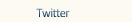
<style>
.page{position:relative;width:132px;height:22px;background:#fdfaf2}
.page>*{position:absolute;margin:0}
.t1{font:13px "Calibri";letter-spacing:-0.04em;scale:0.94 1}
</style>
<div class="page">
<p class="t1" style="left:36px;top:8px;width:34px;height:9px">Twitter</p>
</div>
